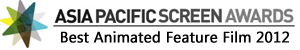
<style>
.page{position:relative;width:300px;height:50px;background:#ffffff}
.page>*{position:absolute;margin:0}
.t1{font:15px "SegoeUI";color:#000000;font-weight:bold}
</style>
<div class="page">
<p class="t1" style="left:61px;top:31px;width:228px;height:12px">Best Animated Feature Film 2012</p>
</div>
